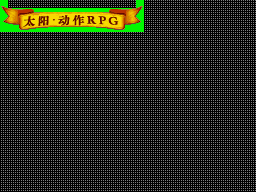
<style>
.page{position:relative;width:256px;height:192px;background:#000000}
.page>*{position:absolute;margin:0}
.t1{font:12px "STSongti-SC-Black";letter-spacing:0.2em;color:#600800;scale:1.05 1}
.t2{font:11.5px "STSongti-SC-Black";letter-spacing:0.2em;color:#600800;scale:1.05 1}
.t3{font:11.5px "STHeitiSC-Light";letter-spacing:0.2em;color:#600800;scale:1.05 1}
</style>
<div class="page">
<p class="t1" style="left:23px;top:15px;width:96px;height:12px"><span class="t2">太阳</span><span class="t3">∙</span><span class="t2">动作</span>RPG</p>
</div>
